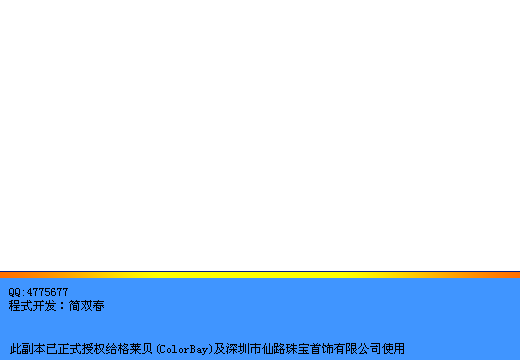
<style>
.page{position:relative;width:520px;height:360px;background:#ffffff}
.page>*{position:absolute;margin:0}
.t1{font:12px "SimSun";color:#010101}
</style>
<div class="page">
<p class="t1" style="left:9px;top:288px;width:59px;height:9px">QQ:4775677</p>
<p class="t1" style="left:9px;top:300px;width:95px;height:11px">程式开发：简双春</p>
<p class="t1" style="left:10px;top:343px;width:394px;height:12px">此副本已正式授权给格莱贝(ColorBay)及深圳市仙路珠宝首饰有限公司使用</p>
</div>
